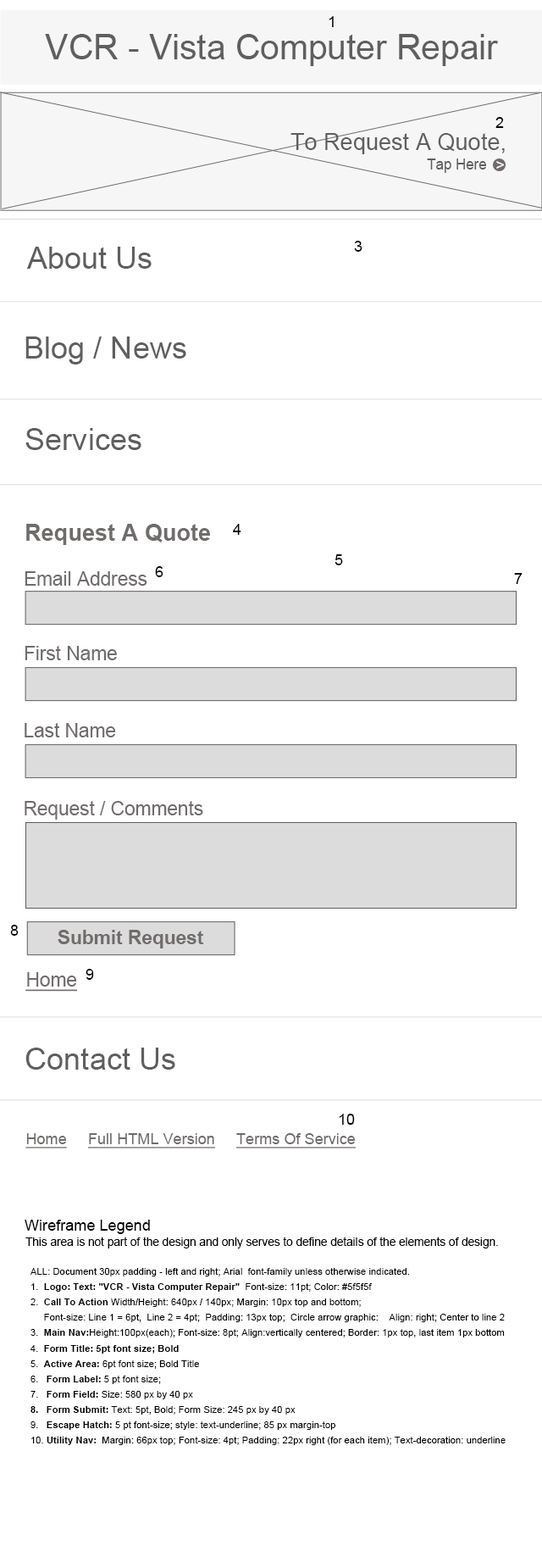
<style>
.page{position:relative;width:542px;height:1568px;background:#ffffff}
.page>*{position:absolute;margin:0}
.t1{font:15.4px "ArialMT";color:#000000}
.t2{font:34.5px "ArialMT";color:#5f5f5f}
.t3{font:23px "ArialMT";color:#5f5f5f}
.t4{font:15.4px "ArialMT";color:#5f5f5f;scale:0.93 1}
.t5{font:15.4px "ArialMT";color:#ffffff}
.t6{font:30.7px "ArialMT";color:#5f5f5f}
.t7{font:23px "Arial-BoldMT";color:#716c6c}
.t8{font:19.2px "ArialMT";color:#716c6c}
.t9{font:19.2px "Arial-BoldMT";color:#716c6c}
.t10{font:19.2px "ArialMT";color:#716c6c;text-decoration:underline}
.t11{font:15.4px "ArialMT";color:#716c6c;text-decoration:underline}
.t12{font:11.5px "ArialMT";color:#000000}
.t13{font:9.6px/7.7px "ArialMT";color:#000000}
.t14{font:9.6px/7.7px "Arial-BoldMT";color:#000000}
</style>
<div class="page">
<p class="t1" style="left:329px;top:16px;width:5px;height:11px">1</p>
<p class="t2" style="left:45px;top:34px;width:454px;height:32px">VCR - Vista Computer Repair</p>
<p class="t1" style="left:496px;top:117px;width:8px;height:11px">2</p>
<p class="t3" style="left:291px;top:133px;width:214px;height:21px">To Request A Quote,</p>
<p class="t4" style="left:427px;top:158px;width:60px;height:15px">Tap Here</p>
<p class="t5" style="left:497px;top:161px;width:8px;height:8px">&gt;</p>
<p class="t1" style="left:354px;top:241px;width:9px;height:11px">3</p>
<p class="t6" style="left:27px;top:247px;width:125px;height:22px">About Us</p>
<p class="t6" style="left:25px;top:336px;width:161px;height:28px">Blog / News</p>
<p class="t6" style="left:25px;top:428px;width:117px;height:22px">Services</p>
<p class="t7" style="left:26px;top:524px;width:184px;height:21px">Request A Quote</p>
<p class="t1" style="left:233px;top:524px;width:9px;height:11px">4</p>
<p class="t1" style="left:335px;top:554px;width:8px;height:11px">5</p>
<p class="t1" style="left:155px;top:566px;width:9px;height:11px">6</p>
<p class="t8" style="left:25px;top:571px;width:122px;height:15px">Email Address</p>
<p class="t1" style="left:514px;top:573px;width:9px;height:11px">7</p>
<p class="t8" style="left:25px;top:646px;width:92px;height:14px">First Name</p>
<p class="t8" style="left:25px;top:723px;width:91px;height:14px">Last Name</p>
<p class="t8" style="left:25px;top:801px;width:178px;height:19px">Request / Comments</p>
<p class="t1" style="left:10px;top:925px;width:9px;height:11px">8</p>
<p class="t9" style="left:58px;top:930px;width:146px;height:18px">Submit Request</p>
<p class="t10" style="left:25px;top:972px;width:52px;height:20px">Home</p>
<p class="t1" style="left:86px;top:969px;width:8px;height:11px">9</p>
<p class="t6" style="left:25px;top:1048px;width:150px;height:22px">Contact Us</p>
<p class="t1" style="left:339px;top:1114px;width:16px;height:11px">10</p>
<p class="t11" style="left:25px;top:1133px;width:331px;height:15px">Home     Full HTML Version     Terms Of Service</p>
<p class="t1" style="left:25px;top:1220px;width:125px;height:14px">Wireframe Legend</p>
<p class="t12" style="left:25px;top:1237px;width:473px;height:11px">This area is not part of the design and only serves to define details of the elements of design.</p>
<p class="t13" style="left:31px;top:1268px;width:475px;height:177px">ALL: Document 30px padding - left and right; Arial  font-family unless otherwise indicated.<br><br>1.  <span class="t14">Logo: Text: "VCR - Vista Computer Repair" </span> Font-size: 11pt; Color: #5f5f5f<br><br>2.  <span class="t14">Call To Action</span> Width/Height: 640px / 140px; Margin: 10px top and bottom; <br><br>     Font-size: Line 1 = 6pt,  Line 2 = 4pt;  Padding: 13px top;  Circle arrow graphic:    Align: right; Center to line 2<br><br>3.  <span class="t14">Main Nav:</span>Height:100px(each); Font-size: 8pt; Align:vertically centered; Border: 1px top, last item 1px bottom<br><br>4.  <span class="t14">Form Title: 5pt font size; Bold <br></span><br>5.  <span class="t14">Active Area: </span>6pt font size; Bold Title<br><br>6.   <span class="t14">Form Label: </span>5 pt font size; <br><br>7.   <span class="t14">Form Field: </span>Size: 580 px by 40 px <br><span class="t14"><br>8.   Form Submit: </span>Text: 5pt, Bold; Form Size: 245 px by 40 px<br><br>9.   <span class="t14">Escape Hatch: </span>5 pt font-size; style: text-underline; 85 px margin-top <br><br>10. <span class="t14">Utility Nav:</span>  Margin: 66px top; Font-size: 4pt; Padding: 22px right (for each item); Text-decoration: underline</p>
</div>
